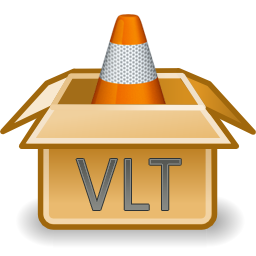
<style>
.page{position:relative;width:256px;height:256px;background:#ffffff}
.page>*{position:absolute;margin:0}
.t1{font:81.5px "Delicious-Roman";color:#7b7d78}
</style>
<div class="page">
<p class="t1" style="left:76px;top:159px;width:105px;height:51px">VLT</p>
</div>
